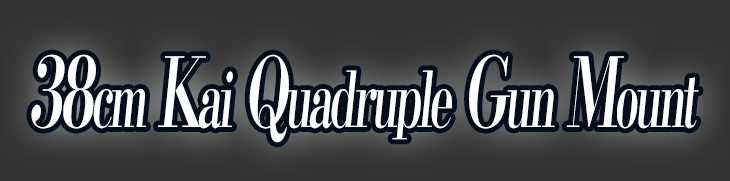
<style>
.page{position:relative;width:730px;height:181px;background:#333333}
.page>*{position:absolute;margin:0}
.t1{font:76.8px "KochoStd-Heavy";letter-spacing:-0.08em;color:#ffffff;font-style:italic;scale:0.57 1}
.t2{font:96px "KochoStd-Heavy";letter-spacing:-0.08em;color:#ffffff;font-style:italic;scale:0.57 1}
</style>
<div class="page">
<p class="t1" style="left:31px;top:54px;width:668px;height:89px"><span class="t2">38</span>cm<span class="t2"> K</span>ai<span class="t2"> Q</span>uadruple<span class="t2"> G</span>un<span class="t2"> M</span>ount</p>
</div>
